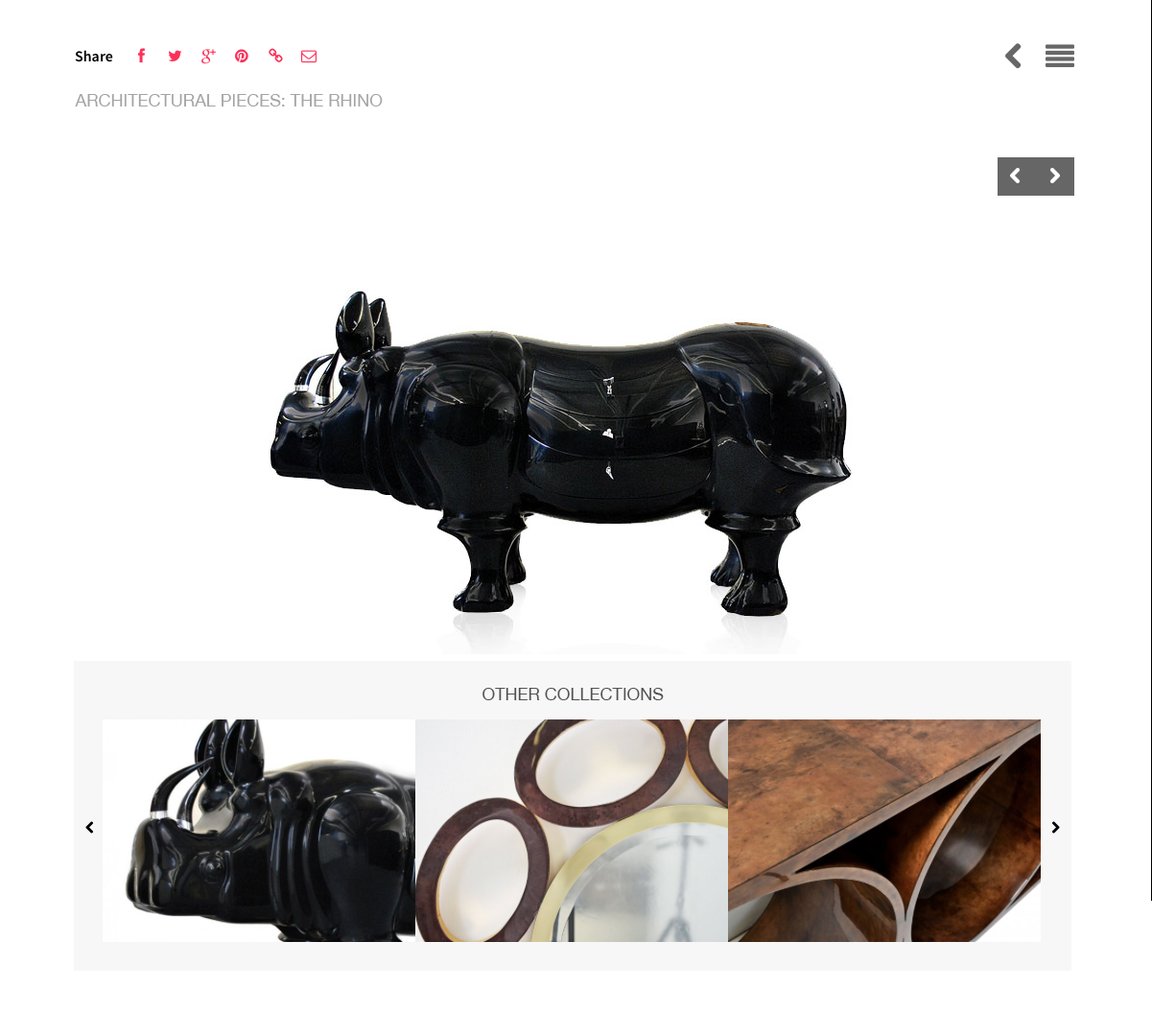
<style>
.page{position:relative;width:1152px;height:1036px;background:#ffffff}
.page>*{position:absolute;margin:0}
.t1{font:17.3px "HelveticaNeue";color:#a5a4a4}
.t2{font:17.3px "HelveticaNeue";color:#535151}
</style>
<div class="page">
<p class="t1" style="left:75px;top:94px;width:308px;height:12px">ARCHITECTURAL PIECES: THE RHINO</p>
<p class="t2" style="left:482px;top:687px;width:181px;height:13px">OTHER COLLECTIONS</p>
</div>
